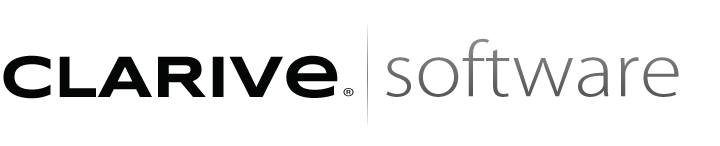
<style>
.page{position:relative;width:720px;height:146px;background:#ffffff}
.page>*{position:absolute;margin:0}
.t1{font:79.9px "MyriadPro-Light";color:#6a6e6d;scale:1.09 1}
.t2{font:60px "Syncopate-Bold";letter-spacing:-0.01em;color:#040505}
.t3{font:60px "Syncopate-Bold";letter-spacing:-0.01em;color:#040505;scale:0.9 1}
.t4{font:25.8px "MyriadPro-Light";letter-spacing:-0.05em;scale:1.22 1}
</style>
<div class="page">
<p class="t1" style="left:386px;top:38px;width:293px;height:59px">software</p>
<p class="t2" style="left:3px;top:55px;width:335px;height:44px">C<span class="t3">L</span>ARIVe</p>
<p class="t4" style="left:343px;top:88px;width:11px;height:9px">®</p>
</div>
